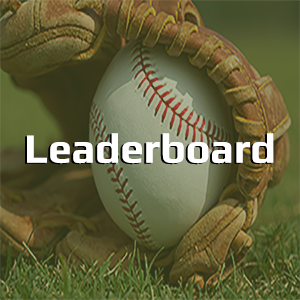
<style>
.page{position:relative;width:300px;height:300px}
.page>*{position:absolute;margin:0}
.t1{font:41.7px "Play-Bold";color:#ffffff}
</style>
<div class="page">
<p class="t1" style="left:27px;top:133px;width:247px;height:31px">Leaderboard</p>
</div>
